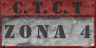
<style>
.page{position:relative;width:96px;height:48px}
.page>*{position:absolute;margin:0}
.t1{font:16.7px "Army";color:#303030;text-transform:uppercase}
.t2{font:19px "Army";letter-spacing:0.22em;color:#3f3f3f;text-transform:uppercase;scale:1.04 1}
</style>
<div class="page">
<p class="t1" style="left:13px;top:1px;width:70px;height:13px">c. t. c. t</p>
<p class="t2" style="left:4px;top:24px;width:87px;height:15px">zona 4</p>
</div>
